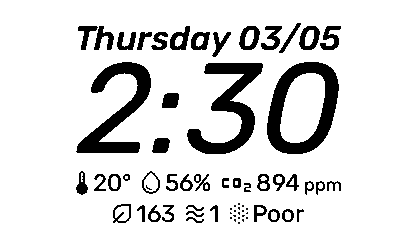
<style>
.page{position:relative;width:416px;height:240px;background:#ffffff}
.page>*{position:absolute;margin:0}
.t1{font:34px "RubikLight-MediumItalic";color:#000000}
.t2{font:128px "RubikLight-Italic";color:#000000}
.t3{font:24px "RubikLight-Regular";color:#000000}
.t4{font:18px "RubikLight-Regular";color:#000000}
</style>
<div class="page">
<p class="t1" style="left:77px;top:23px;width:264px;height:34px">Thursday 03/05</p>
<p class="t2" style="left:76px;top:61px;width:264px;height:94px">2:30</p>
<p class="t3" style="left:94px;top:173px;width:37px;height:19px">20°</p>
<p class="t3" style="left:166px;top:174px;width:45px;height:18px">56%</p>
<p class="t3" style="left:257px;top:173px;width:84px;height:22px">894 <span class="t4">ppm</span></p>
<p class="t3" style="left:136px;top:205px;width:39px;height:18px">163</p>
<p class="t3" style="left:209px;top:205px;width:9px;height:17px">1</p>
<p class="t3" style="left:254px;top:205px;width:50px;height:18px">Poor</p>
</div>
